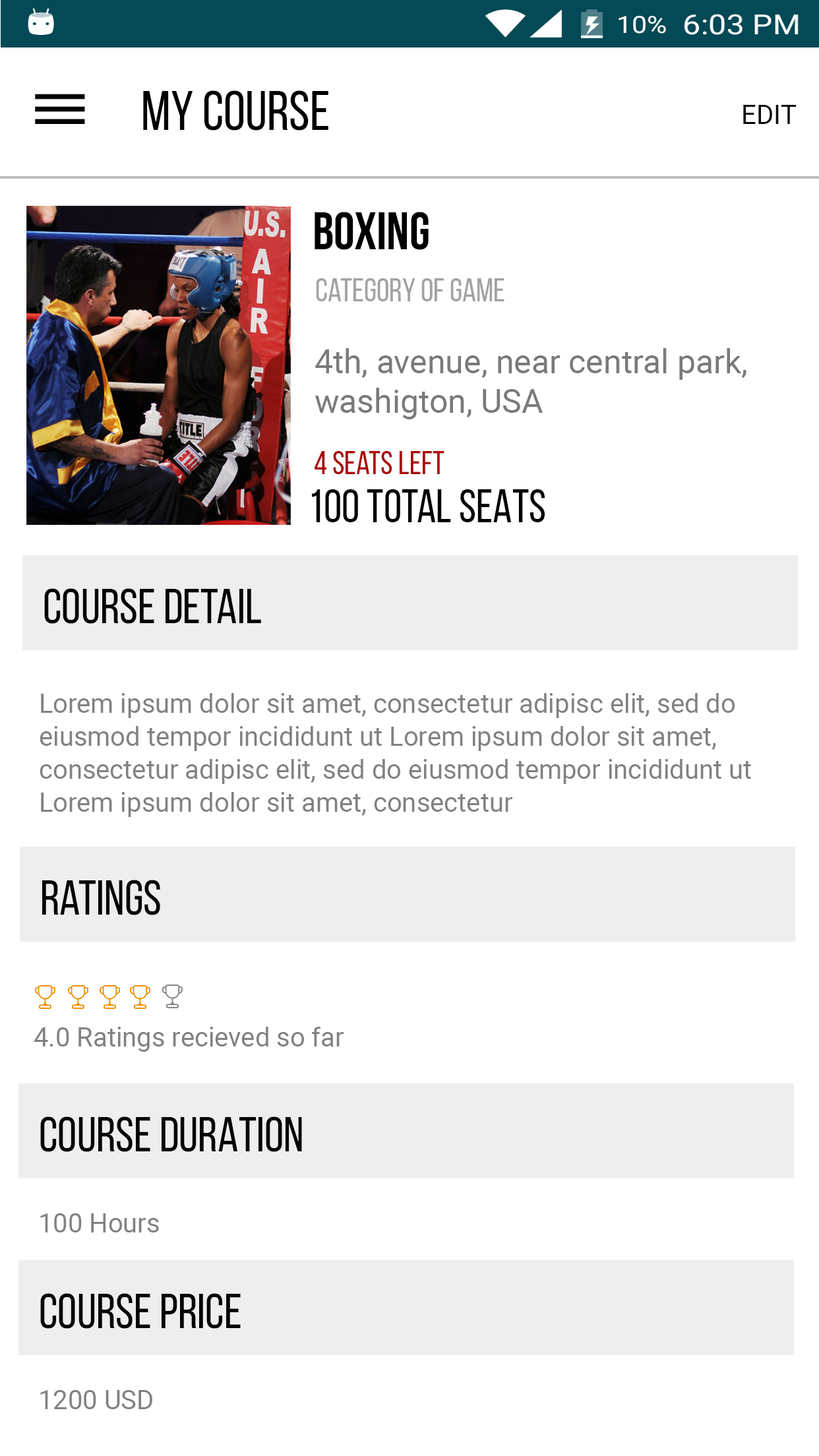
<style>
.page{position:relative;width:819px;height:1456px;background:#ffffff}
.page>*{position:absolute;margin:0}
.t1{font:56px "BebasNeueRegular";color:#010101}
.t2{font:26.4px "Roboto-Regular";color:#050505}
.t3{font:52.8px "TestN-TestNBold";color:#000000}
.t4{font:33px "TestN-TestNRegular";color:#a3a2a2}
.t5{font:33px "Roboto-Regular";color:#7b7979}
.t6{font:33px "BebasNeueRegular";color:#aa0505}
.t7{font:46.2px "BebasNeueRegular";color:#020202}
.t8{font:49.5px "BebasNeueRegular";color:#050505}
.t9{font:26.4px/33px "Roboto-Regular";color:#828181}
.t10{font:26.4px "Roboto-Regular";color:#828181}
</style>
<div class="page">
<p class="t1" style="left:143px;top:90px;width:185px;height:41px">My COurse</p>
<p class="t2" style="left:743px;top:105px;width:53px;height:19px">EDIT</p>
<p class="t3" style="left:315px;top:212px;width:114px;height:38px">BOXING</p>
<p class="t4" style="left:316px;top:278px;width:188px;height:23px">category of game</p>
<p class="t5" style="left:315px;top:348px;width:431px;height:71px">4th, avenue, near central park, <br>washigton, USA</p>
<p class="t6" style="left:315px;top:451px;width:129px;height:23px">4 seats left</p>
<p class="t7" style="left:312px;top:489px;width:233px;height:33px">100 TOTAL SEATS</p>
<p class="t8" style="left:44px;top:588px;width:217px;height:36px">COurse Detail</p>
<p class="t9" style="left:40px;top:693px;width:711px;height:124px">Lorem ipsum dolor sit amet, consectetur adipisc elit, sed do <br>eiusmod tempor incididunt ut Lorem ipsum dolor sit amet, <br>consectetur adipisc elit, sed do eiusmod tempor incididunt ut<br>Lorem ipsum dolor sit amet, consectetur</p>
<p class="t8" style="left:42px;top:880px;width:118px;height:35px">Ratings</p>
<p class="t10" style="left:34px;top:1027px;width:310px;height:25px">4.0 Ratings recieved so far</p>
<p class="t8" style="left:40px;top:1116px;width:262px;height:36px">COURSE DURATION</p>
<p class="t10" style="left:40px;top:1213px;width:119px;height:19px">100 Hours</p>
<p class="t8" style="left:40px;top:1293px;width:201px;height:36px">COURSE Price</p>
<p class="t10" style="left:40px;top:1390px;width:112px;height:19px">1200 USD</p>
</div>
